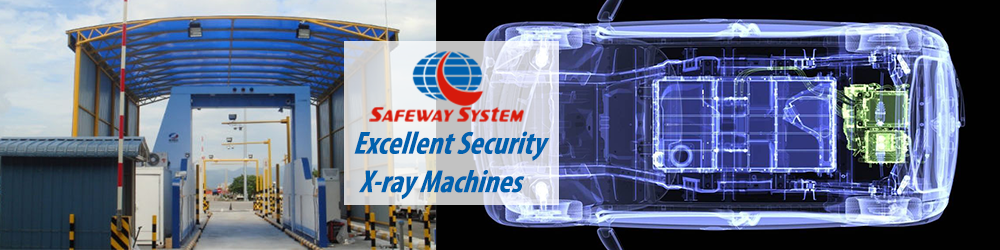
<style>
.page{position:relative;width:1000px;height:250px}
.page>*{position:absolute;margin:0}
.t1{font:33.3px "MyriadPro-BoldCond";color:#0061ae;scale:0.94 1}
</style>
<div class="page">
<p class="t1" style="left:354px;top:131px;width:196px;height:69px;text-align:center">Excellent Security <br>X-ray Machines</p>
</div>
